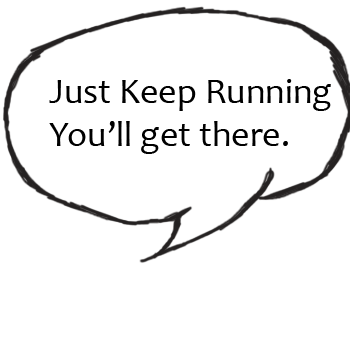
<style>
.page{position:relative;width:350px;height:350px;background:#ffffff}
.page>*{position:absolute;margin:0}
.t1{font:36px "Candara";color:#000000}
</style>
<div class="page">
<p class="t1" style="left:49px;top:79px;width:282px;height:75px">Just Keep Running<br>You’ll get there.</p>
</div>
